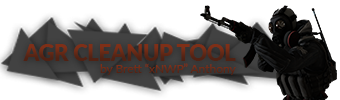
<style>
.page{position:relative;width:340px;height:100px;background:#ffffff}
.page>*{position:absolute;margin:0}
.t1{font:21.5px "Lato-Black"}
.t2{font:12px "Lato-Regular";color:#672916}
</style>
<div class="page">
<p class="t1" style="left:23px;top:44px;width:213px;height:17px">AGR CLEANUP TOOL</p>
<p class="t2" style="left:100px;top:63px;width:136px;height:12px">by Brett “xNWP” Anthony</p>
</div>
